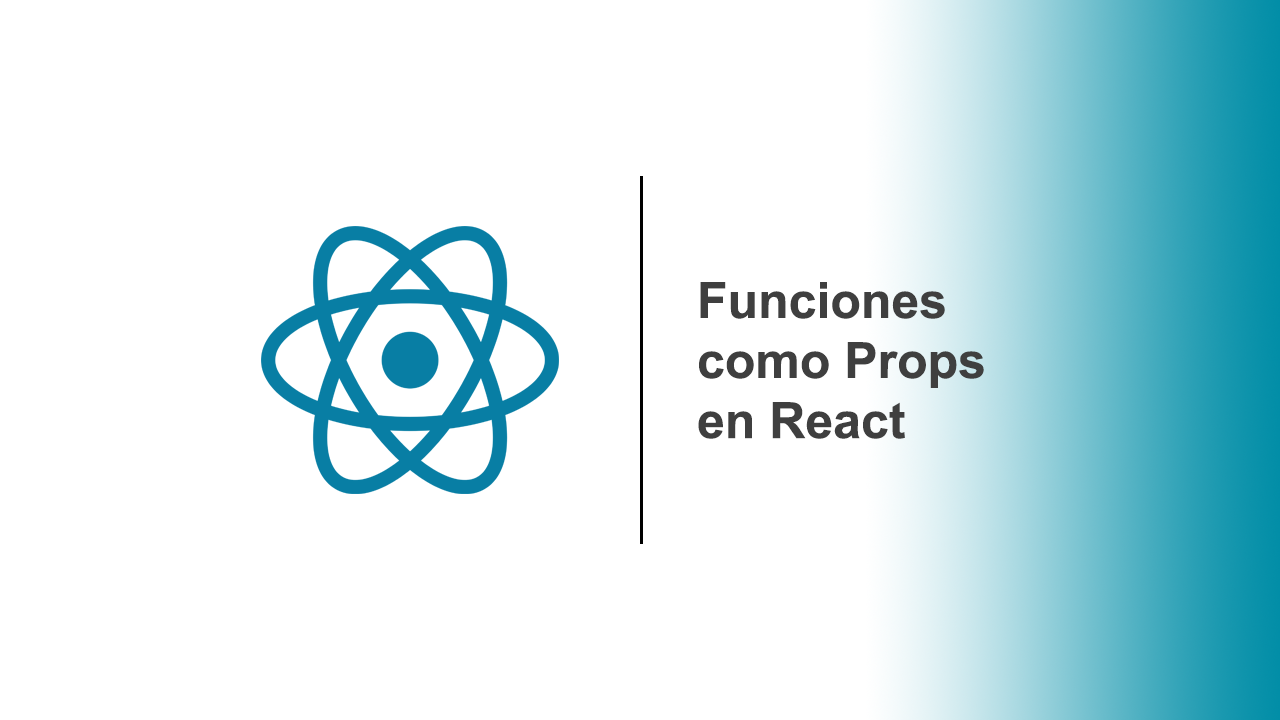
<style>
.page{position:relative;width:1280px;height:720px;background:#ffffff}
.page>*{position:absolute;margin:0}
.t1{font:50px "Arial-BoldMT";color:#3f3f3f}
</style>
<div class="page">
<p class="t1" style="left:698px;top:282px;width:286px;height:157px">Funciones<br>como Props<br>en React</p>
</div>
